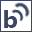
<style>
.page{position:relative;width:32px;height:32px;background:#ffffff}
.page>*{position:absolute;margin:0}
.t1{font:24px "NirmalaUI-Bold";color:#3c4562;scale:1.04 1}
</style>
<div class="page">
<p class="t1" style="left:4px;top:10px;width:14px;height:18px">b</p>
</div>
